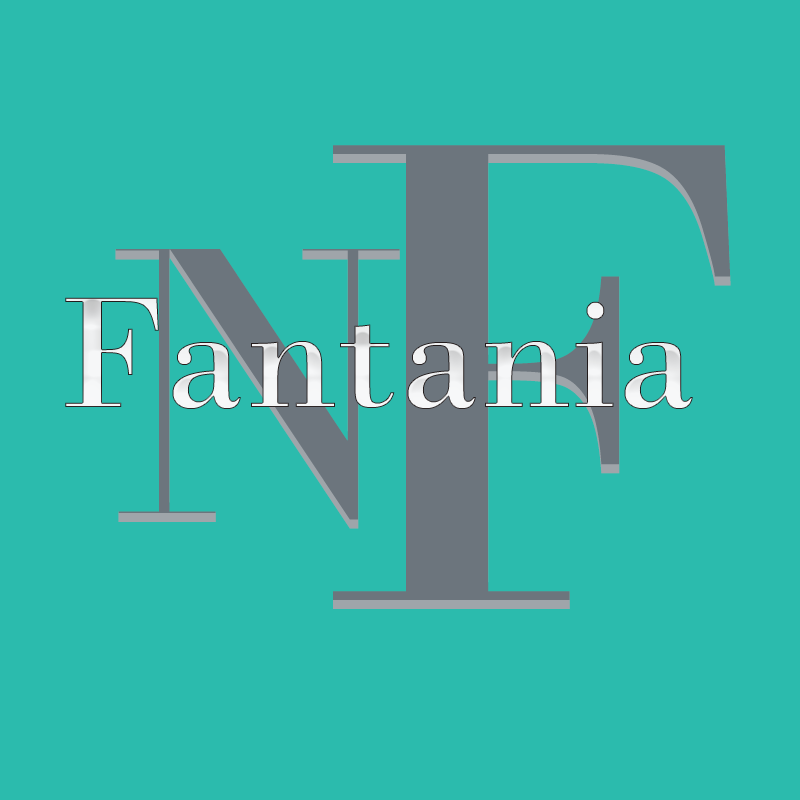
<style>
.page{position:relative;width:800px;height:800px;background:#2bbbad}
.page>*{position:absolute;margin:0}
.t1{font:708.3px "BodoniMT";color:#6c757d}
.t2{font:416.7px "BodoniMT";color:#6c757d}
.t3{font:166.7px "BodoniMT";color:#f6f7f8}
</style>
<div class="page">
<p class="t1" style="left:333px;top:145px;width:398px;height:464px">F</p>
<p class="t2" style="left:115px;top:249px;width:285px;height:280px">N</p>
<p class="t3" style="left:65px;top:297px;width:628px;height:112px">Fantania</p>
</div>
